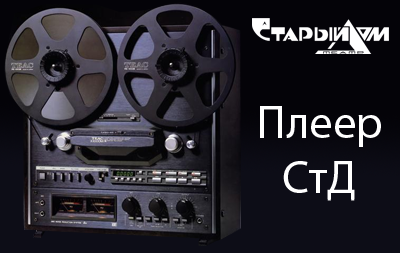
<style>
.page{position:relative;width:400px;height:253px}
.page>*{position:absolute;margin:0}
.t1{font:46.5px "MyriadPro-Regular";color:#ffffff}
</style>
<div class="page">
<p class="t1" style="left:260px;top:106px;width:121px;height:95px;text-align:center">Плеер<br>СтД</p>
</div>
